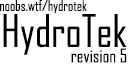
<style>
.page{position:relative;width:128px;height:64px;background:#ffffff}
.page>*{position:absolute;margin:0}
.t1{font:14px "AgencyFB-Reg";color:#000000}
.t2{font:43px "AgencyFB-Reg";color:#000000}
.t3{font:18px "AgencyFB-Reg";color:#000000}
</style>
<div class="page">
<p class="t1" style="left:0px;top:0px;width:87px;height:14px">noobs.wtf/hydrotek</p>
<p class="t2" style="left:3px;top:14px;width:124px;height:41px">HydroTek</p>
<p class="t3" style="left:71px;top:48px;width:56px;height:15px">revision 5</p>
</div>
